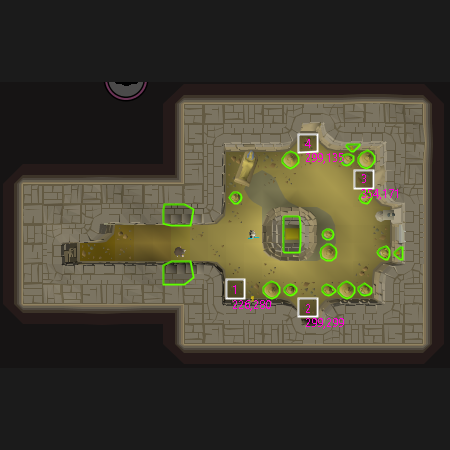
<style>
.page{position:relative;width:450px;height:450px;background:#1b1b1b}
.page>*{position:absolute;margin:0}
.t1{font:12px "SegoeUI";color:#ff00d8}
</style>
<div class="page">
<p class="t1" style="left:305px;top:139px;width:38px;height:25px">4<br>299,135</p>
<p class="t1" style="left:362px;top:174px;width:36px;height:26px">3<br>354,171</p>
<p class="t1" style="left:233px;top:285px;width:38px;height:26px">1<br>226,280</p>
<p class="t1" style="left:306px;top:304px;width:38px;height:25px">2<br>299,299</p>
</div>
